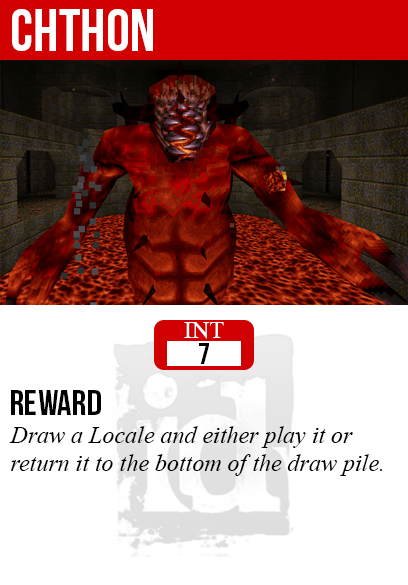
<style>
.page{position:relative;width:408px;height:585px;background:#ffffff}
.page>*{position:absolute;margin:0}
.t1{font:60px "BebasNeue";color:#ffffff}
.t2{font:24px "TimesNewRomanPSMT";color:#ffffff}
.t3{font:30px "BebasNeue";color:#000000}
.t4{font:36px "BebasNeue";color:#000000}
.t5{font:24px "TimesNewRomanPS-ItalicMT";color:#000000}
</style>
<div class="page">
<p class="t1" style="left:12px;top:9px;width:141px;height:42px">Chthon</p>
<p class="t2" style="left:184px;top:322px;width:40px;height:17px">INT</p>
<p class="t3" style="left:199px;top:343px;width:10px;height:21px">7</p>
<p class="t4" style="left:11px;top:390px;width:90px;height:25px">reward</p>
<p class="t5" style="left:9px;top:426px;width:374px;height:50px">Draw a Locale and either play it or<br>return it to the bottom of the draw pile.</p>
</div>
